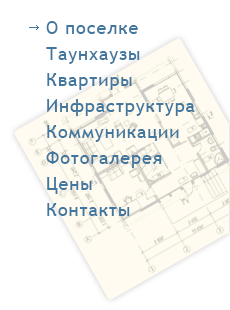
<style>
.page{position:relative;width:230px;height:310px;background:#ffffff}
.page>*{position:absolute;margin:0}
.t1{font:18px/26px "TrebuchetMS";letter-spacing:0.05em;color:#41769e}
</style>
<div class="page">
<p class="t1" style="left:46px;top:21px;width:149px;height:195px">О поселке<br>Таунхаузы<br>Квартиры<br>Инфраструктура<br>Коммуникации<br>Фотогалерея<br>Цены<br>Контакты</p>
</div>
